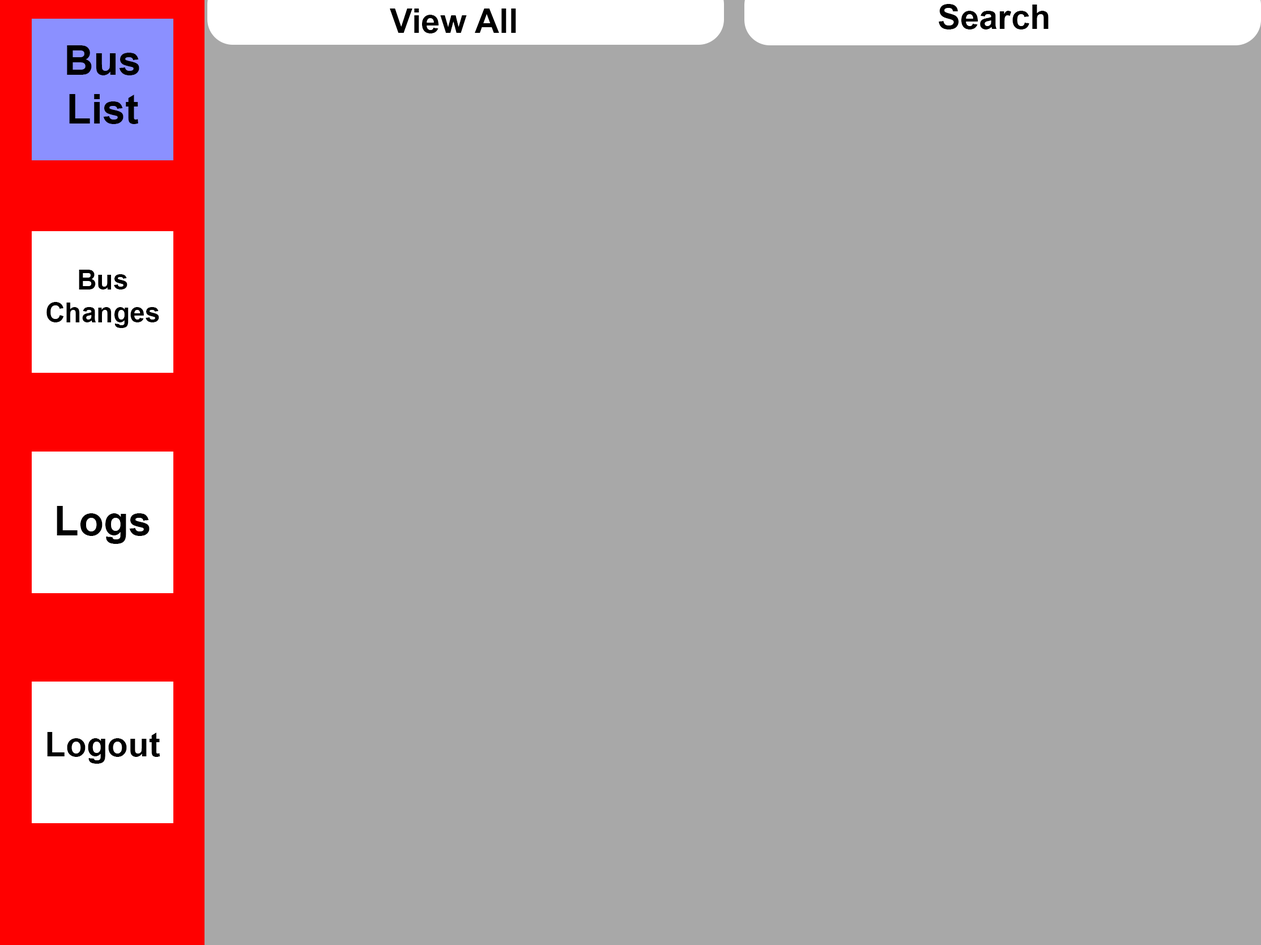
<style>
.page{position:relative;width:1261px;height:945px;background:#a8a8a8}
.page>*{position:absolute;margin:0}
.t1{font:34px "Arial-BoldMT";color:#000000}
.t2{font:40.8px "Arial-BoldMT";color:#000000}
.t3{font:27.2px "Arial-BoldMT";color:#000000}
</style>
<div class="page">
<p class="t1" style="left:939px;top:4px;width:110px;height:25px">Search</p>
<p class="t1" style="left:390px;top:9px;width:126px;height:24px">View All</p>
<p class="t2" style="left:67px;top:45px;width:72px;height:79px;text-align:center">Bus List</p>
<p class="t3" style="left:46px;top:270px;width:113px;height:58px;text-align:center">Bus Changes</p>
<p class="t2" style="left:57px;top:506px;width:93px;height:38px">Logs</p>
<p class="t1" style="left:47px;top:732px;width:113px;height:32px">Logout</p>
</div>
